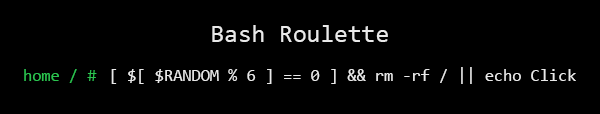
<style>
.page{position:relative;width:600px;height:114px;background:#000000}
.page>*{position:absolute;margin:0}
.t1{font:25px "Consolas";color:#e9e9e9}
.t2{font:16.7px "Consolas";color:#2cc350}
.t3{font:16.7px "Consolas";color:#e9e9e9}
</style>
<div class="page">
<p class="t1" style="left:212px;top:25px;width:176px;height:17px">Bash Roulette</p>
<p class="t2" style="left:24px;top:69px;width:73px;height:14px">home / #</p>
<p class="t3" style="left:111px;top:67px;width:465px;height:17px">[ $[ $RANDOM % 6 ] == 0 ] &amp;&amp; rm -rf / || echo Click</p>
</div>
